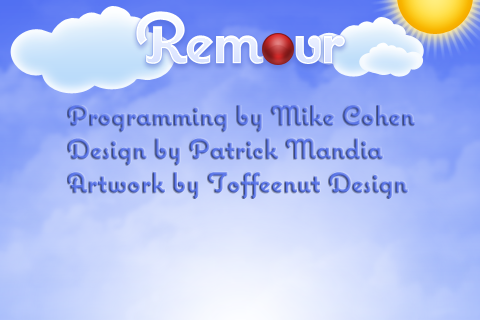
<style>
.page{position:relative;width:480px;height:320px}
.page>*{position:absolute;margin:0}
.t1{font:28px "CoquetteBold"}
</style>
<div class="page">
<p class="t1" style="left:67px;top:105px;width:348px;height:94px">Programming by Mike Cohen<br>Design by Patrick Mandia<br>Artwork by Toffeenut Design</p>
</div>
